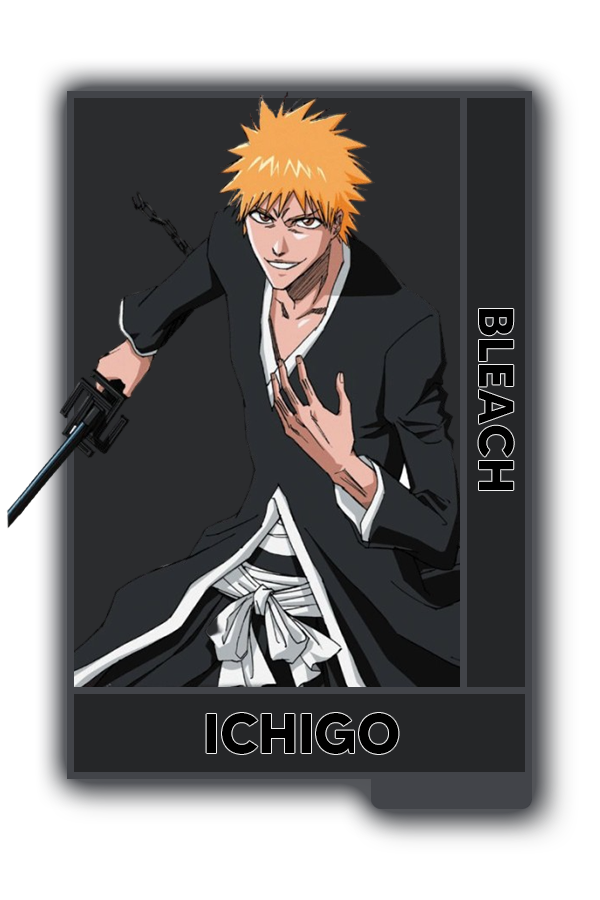
<style>
.page{position:relative;width:600px;height:900px;background:#ffffff}
.page>*{position:absolute;margin:0}
.t1{font:48.8px "MADETOMMY-Bold";color:#000000}
.t2{font:55.8px "MADETOMMY-Bold";color:#000000}
</style>
<div class="page">
<p class="t1" style="left:478px;top:309px;width:36px;height:181px;rotate:90deg">BLEACH</p>
<p class="t2" style="left:206px;top:713px;width:193px;height:41px">ICHIGO</p>
</div>
